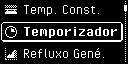
<style>
.page{position:relative;width:128px;height:64px;background:#000000}
.page>*{position:absolute;margin:0}
.t1{font:16px "PixelOperator";color:#ffffff}
.t2{font:16px "PixelOperator-Bold";color:#ffffff}
</style>
<div class="page">
<p class="t1" style="left:24px;top:5px;width:75px;height:11px">Temp. Const.</p>
<p class="t2" style="left:24px;top:27px;width:93px;height:11px">Temporizador</p>
<p class="t1" style="left:24px;top:48px;width:80px;height:10px">Refluxo Gené.</p>
</div>
